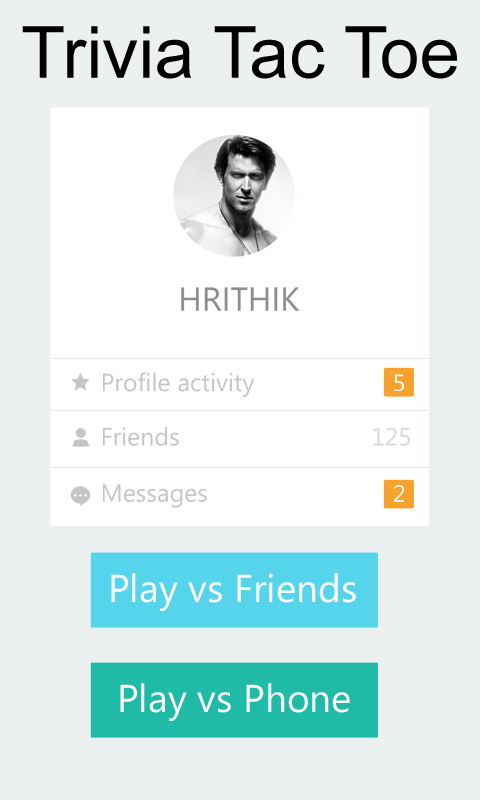
<style>
.page{position:relative;width:480px;height:800px;background:#ecf0f1}
.page>*{position:absolute;margin:0}
.t1{font:72px "ArialMT";color:#000000}
.t2{font:33.2px "SegoeWPN";color:#8d8d8d;text-transform:uppercase}
.t3{font:24.9px "SegoeWPN";color:#c5c5c5}
.t4{font:23.7px "SegoeWPN";color:#ffffff}
.t5{font:24.9px "SegoeWPN";color:#d8d8d8}
.t6{font:38.9px "SegoeUI";color:#ffffff}
</style>
<div class="page">
<p class="t1" style="left:22px;top:26px;width:435px;height:53px">Trivia Tac Toe</p>
<p class="t2" style="left:181px;top:287px;width:119px;height:24px">hrithik</p>
<p class="t3" style="left:103px;top:372px;width:151px;height:25px">Profile activity</p>
<p class="t4" style="left:394px;top:374px;width:10px;height:17px">5</p>
<p class="t3" style="left:103px;top:427px;width:76px;height:19px">Friends</p>
<p class="t5" style="left:373px;top:428px;width:37px;height:18px">125</p>
<p class="t3" style="left:103px;top:484px;width:104px;height:24px">Messages</p>
<p class="t4" style="left:394px;top:485px;width:10px;height:17px">2</p>
<p class="t6" style="left:111px;top:573px;width:245px;height:38px">Play vs Friends</p>
<p class="t6" style="left:120px;top:683px;width:230px;height:38px">Play vs Phone</p>
</div>
